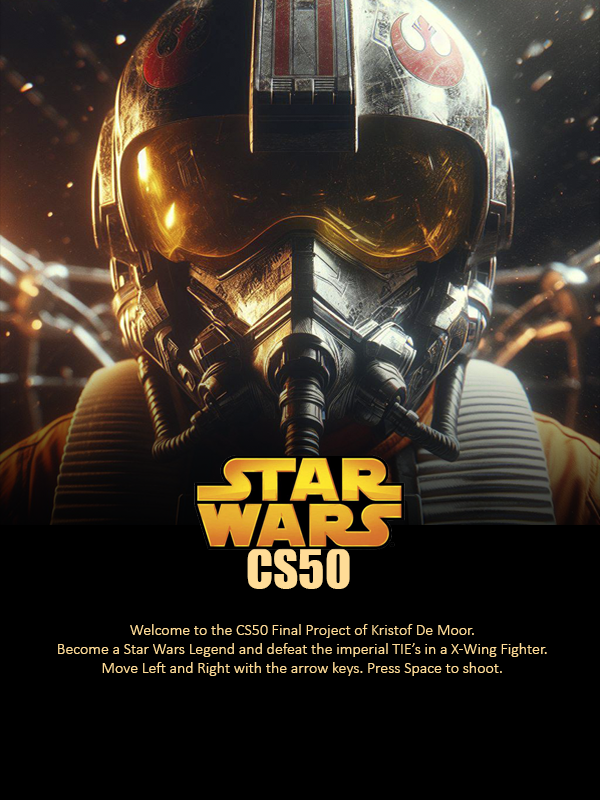
<style>
.page{position:relative;width:600px;height:800px;background:#000000}
.page>*{position:absolute;margin:0}
.t1{font:49px "Impact";color:#ffdc97}
.t2{font:16px "Calibri-Light";color:#ffdc97}
</style>
<div class="page">
<p class="t1" style="left:247px;top:548px;width:103px;height:41px">CS50</p>
<p class="t2" style="left:58px;top:624px;width:489px;height:52px;text-align:center">Welcome to the CS50 Final Project of Kristof De Moor.<br>Become a Star Wars Legend and defeat the imperial TIE’s in a X-Wing Fighter. Move Left and Right with the arrow keys. Press Space to shoot.</p>
</div>
